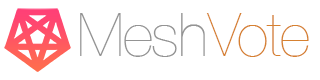
<style>
.page{position:relative;width:320px;height:80px;background:#ffffff}
.page>*{position:absolute;margin:0}
.t1{font:60px "HelveticaNeue-UltraLight";letter-spacing:-0.02em;color:#949494}
.t2{font:60px "HelveticaNeue-UltraLight";letter-spacing:-0.02em;color:#d68131}
</style>
<div class="page">
<p class="t1" style="left:80px;top:13px;width:125px;height:44px">Mesh</p>
<p class="t2" style="left:206px;top:13px;width:103px;height:44px">Vote</p>
</div>
